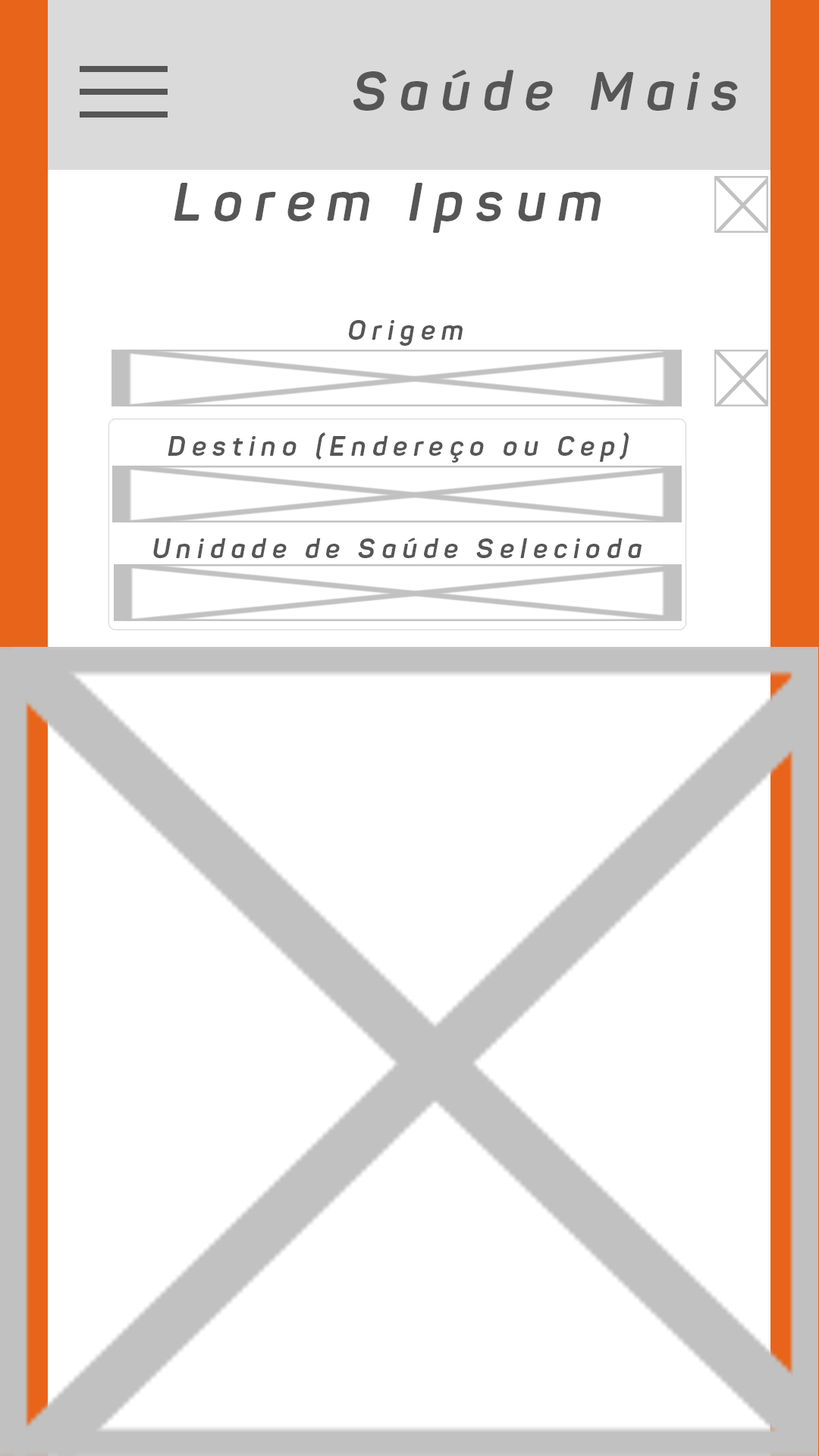
<style>
.page{position:relative;width:819px;height:1456px;background:#ffffff}
.page>*{position:absolute;margin:0}
.t1{font:53.9px "Panton-BoldItalic";letter-spacing:0.23em;color:#565656}
.t2{font:27px "Panton-BoldItalic";letter-spacing:0.23em;color:#565656}
</style>
<div class="page">
<p class="t1" style="left:353px;top:70px;width:385px;height:41px">Saúde Mais</p>
<p class="t1" style="left:174px;top:183px;width:427px;height:50px">Lorem Ipsum</p>
<p class="t2" style="left:349px;top:320px;width:114px;height:26px">Origem</p>
<p class="t2" style="left:168px;top:432px;width:461px;height:31px">Destino (Endereço ou Cep)</p>
<p class="t2" style="left:153px;top:538px;width:489px;height:20px">Unidade de Saúde Selecioda</p>
</div>
